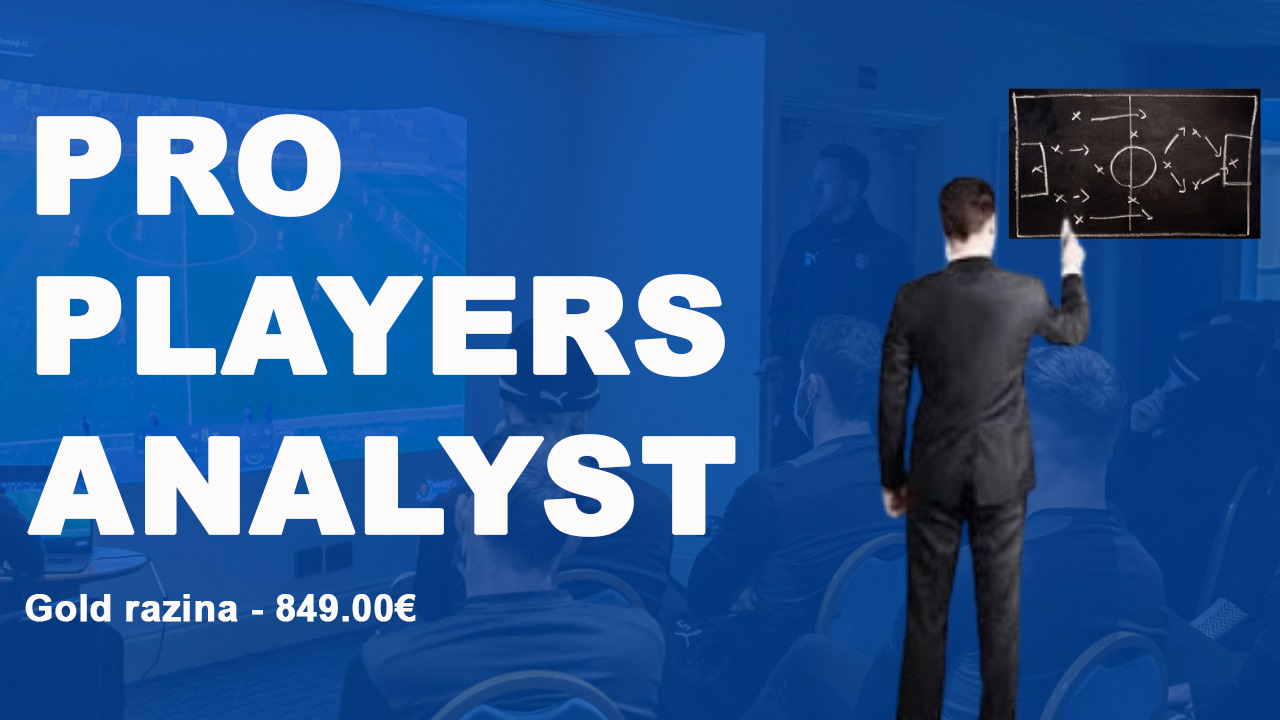
<style>
.page{position:relative;width:1280px;height:720px}
.page>*{position:absolute;margin:0}
.t1{font:133.3px "Arial-Black";color:#fcfbfa;font-weight:bold}
.t2{font:37.3px "Arial-BoldMT";color:#fcfbfa;font-weight:bold}
</style>
<div class="page">
<p class="t1" style="left:27px;top:114px;width:709px;height:423px">PRO<br>PLAYERS<br>ANALYST</p>
<p class="t2" style="left:25px;top:594px;width:391px;height:28px">Gold razina - 849.00€</p>
</div>
